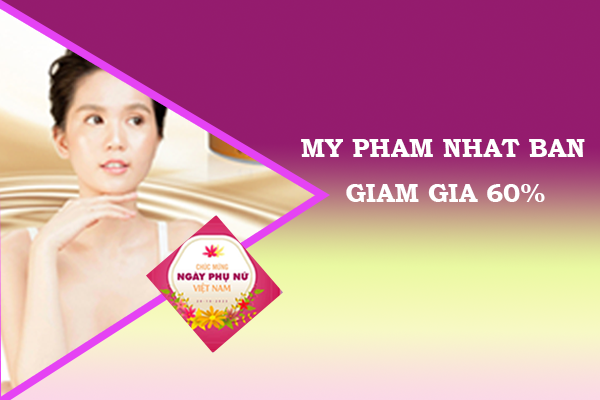
<style>
.page{position:relative;width:600px;height:400px}
.page>*{position:absolute;margin:0}
.t1{font:26px/22.4px "BookmanOldStyle-Bold";color:#ffffff}
</style>
<div class="page">
<p class="t1" style="left:301px;top:139px;width:284px;height:63px;text-align:center">MY PHAM NHAT BAN<br><br>GIAM GIA 60%</p>
</div>
